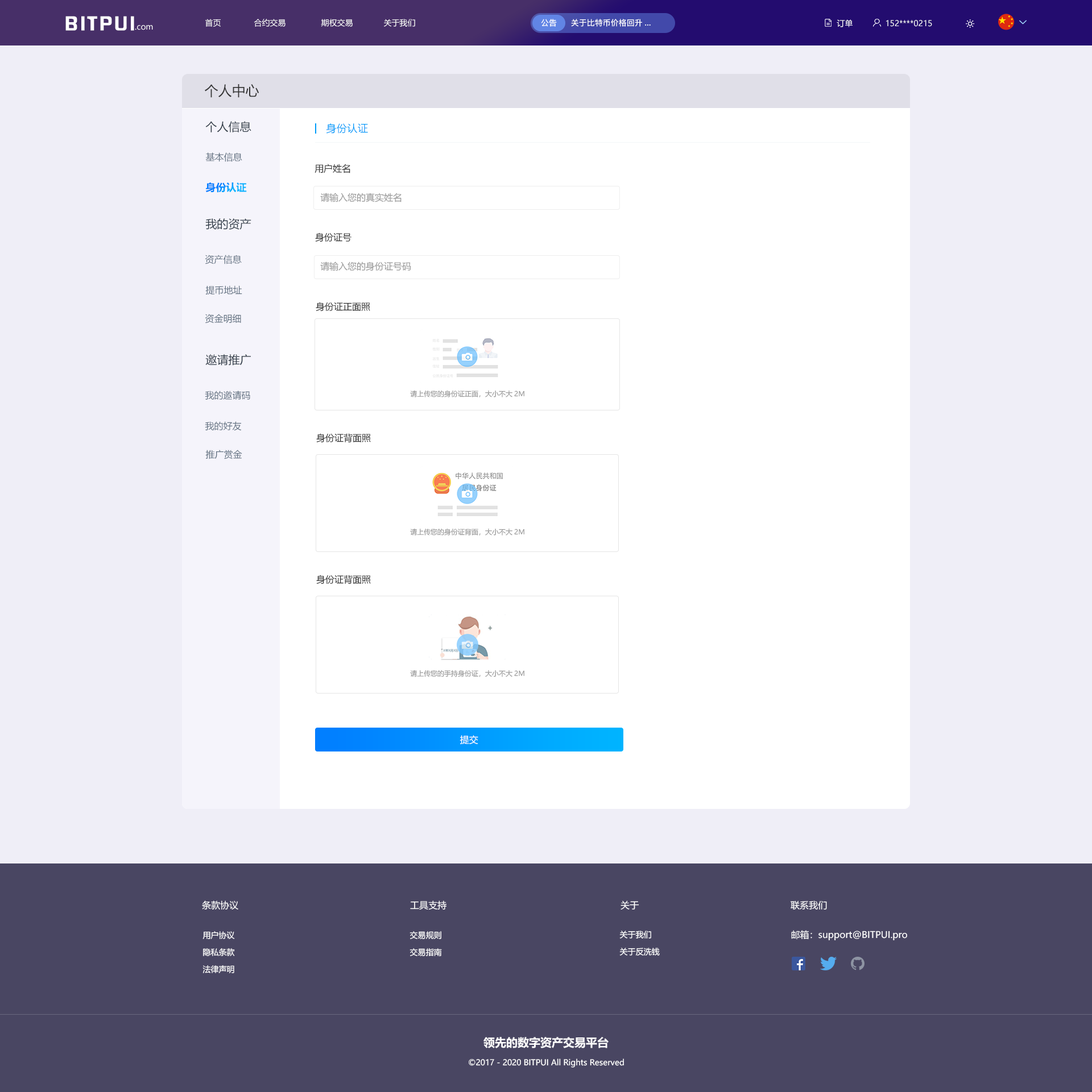
<style>
.page{position:relative;width:1092px;height:1092px;background:#ffffff}
.page>*{position:absolute;margin:0}
.t1{font:17.4px "FZHZGBJW--GB1-0";letter-spacing:0.1em;color:#ffffff;scale:1.14 1}
.t2{font:8px "MicrosoftYaHei";color:#ffffff}
.t3{font:8px "PingFang-SC-Bold";color:#ffffff}
.t4{font:13.6px "MicrosoftYaHei";color:#333333}
.t5{font:11.4px "MicrosoftYaHei";color:#303b47}
.t6{font:10.2px "MicrosoftYaHei";letter-spacing:0.03em;color:#009dfa}
.t7{font:9.1px "MicrosoftYaHei";color:#637282}
.t8{font:9.1px "MicrosoftYaHei";color:#333333}
.t9{font:10.2px "MicrosoftYaHei-Bold"}
.t10{font:9.1px "MicrosoftYaHei";color:#999999}
.t11{font:6.8px "MicrosoftYaHei";color:#999999}
.t12{font:9.1px "MicrosoftYaHei";color:#ffffff}
.t13{font:8px/17.1px "MicrosoftYaHei";color:#ffffff}
.t14{font:11.4px "MicrosoftYaHei-Bold";color:#ffffff}
</style>
<div class="page">
<p class="t1" style="left:65px;top:16px;width:69px;height:15px">BITPUI</p>
<p class="t2" style="left:135px;top:25px;width:18px;height:5px">.com</p>
<p class="t2" style="left:205px;top:19px;width:210px;height:8px">首页              合约交易               期权交易             关于我们</p>
<p class="t3" style="left:541px;top:19px;width:16px;height:8px">公告</p>
<p class="t3" style="left:571px;top:19px;width:79px;height:8px">关于比特币价格回升...</p>
<p class="t2" style="left:836px;top:19px;width:16px;height:8px">订单</p>
<p class="t2" style="left:886px;top:20px;width:46px;height:7px">152****0215</p>
<p class="t4" style="left:205px;top:84px;width:54px;height:14px">个人中心</p>
<p class="t5" style="left:205px;top:121px;width:46px;height:11px">个人信息</p>
<p class="t6" style="left:326px;top:123px;width:42px;height:11px">身份认证</p>
<p class="t7" style="left:205px;top:152px;width:37px;height:10px">基本信息</p>
<p class="t8" style="left:314px;top:164px;width:36px;height:9px">用户姓名</p>
<p class="t9" style="left:205px;top:183px;width:42px;height:10px">身份认证</p>
<p class="t10" style="left:320px;top:193px;width:81px;height:9px">请输入您的真实姓名</p>
<p class="t5" style="left:205px;top:218px;width:46px;height:12px">我的资产</p>
<p class="t8" style="left:315px;top:233px;width:36px;height:9px">身份证号</p>
<p class="t7" style="left:205px;top:255px;width:37px;height:9px">资产信息</p>
<p class="t10" style="left:320px;top:262px;width:91px;height:9px">请输入您的身份证号码</p>
<p class="t7" style="left:205px;top:285px;width:37px;height:10px">提币地址</p>
<p class="t8" style="left:316px;top:302px;width:54px;height:10px">身份证正面照</p>
<p class="t7" style="left:205px;top:314px;width:36px;height:10px">资金明细</p>
<p class="t5" style="left:205px;top:354px;width:46px;height:12px">邀请推广</p>
<p class="t7" style="left:205px;top:391px;width:45px;height:9px">我的邀请码</p>
<p class="t11" style="left:410px;top:390px;width:114px;height:7px">请上传您的身份证正面，大小不大2M</p>
<p class="t7" style="left:205px;top:421px;width:37px;height:10px">我的好友</p>
<p class="t8" style="left:316px;top:433px;width:55px;height:10px">身份证背面照</p>
<p class="t7" style="left:205px;top:450px;width:37px;height:9px">推广赏金</p>
<p class="t11" style="left:410px;top:528px;width:114px;height:8px">请上传您的身份证背面，大小不大2M</p>
<p class="t8" style="left:316px;top:575px;width:55px;height:10px">身份证背面照</p>
<p class="t11" style="left:410px;top:670px;width:114px;height:7px">请上传您的手持身份证，大小不大2M</p>
<p class="t12" style="left:459px;top:735px;width:19px;height:10px">提交</p>
<p class="t12" style="left:202px;top:901px;width:36px;height:9px">条款协议</p>
<p class="t12" style="left:410px;top:901px;width:36px;height:9px">工具支持</p>
<p class="t12" style="left:620px;top:901px;width:19px;height:9px">关于</p>
<p class="t12" style="left:790px;top:901px;width:37px;height:9px">联系我们</p>
<p class="t13" style="left:202px;top:931px;width:33px;height:42px;text-align:center">用户协议<br>隐私条款<br>法律声明</p>
<p class="t13" style="left:409px;top:931px;width:33px;height:25px">交易规则<br>交易指南</p>
<p class="t13" style="left:619px;top:931px;width:41px;height:25px">关于我们<br>关于反洗钱</p>
<p class="t12" style="left:791px;top:930px;width:116px;height:11px">邮箱：support@BITPUI.pro</p>
<p class="t14" style="left:483px;top:1037px;width:125px;height:11px">领先的数字资产交易平台</p>
<p class="t2" style="left:469px;top:1059px;width:155px;height:9px">©2017 - 2020 BITPUI All Rights Reserved</p>
</div>
